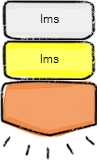
<style>
.page{position:relative;width:99px;height:160px}
.page>*{position:absolute;margin:0}
.t1{font:12px "Gulim";color:#020202}
</style>
<div class="page">
<p class="t1" style="left:41px;top:14px;width:18px;height:9px">lms</p>
<p class="t1" style="left:40px;top:54px;width:19px;height:9px">lms</p>
</div>
